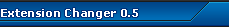
<style>
.page{position:relative;width:229px;height:27px}
.page>*{position:absolute;margin:0}
.t1{font:11px "Verdana-Bold";color:#ffffff}
</style>
<div class="page">
<p class="t1" style="left:1px;top:8px;width:137px;height:11px">Extension Changer 0.5</p>
</div>
